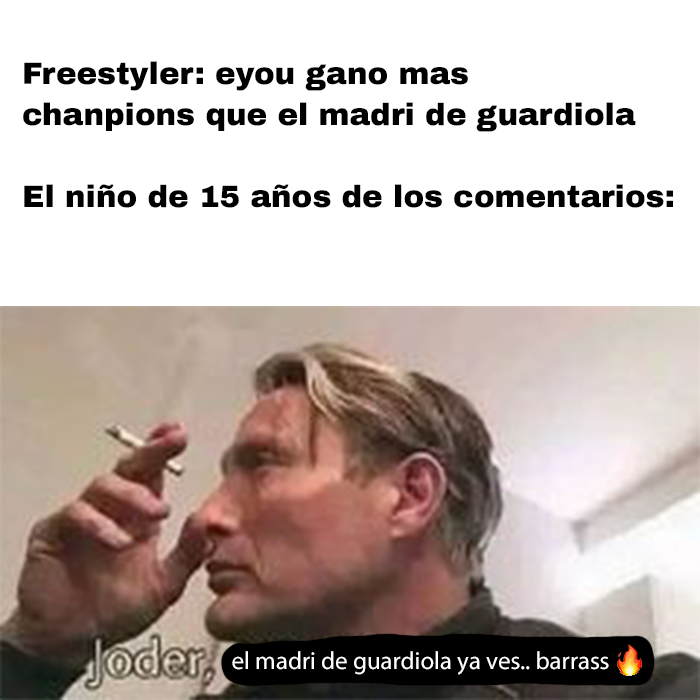
<style>
.page{position:relative;width:700px;height:700px;background:#ffffff}
.page>*{position:absolute;margin:0}
.t1{font:30.9px "ArchivoBlack-Regular";color:#000000}
.t2{font:24.9px "MyriadPro-Regular";color:#ffffff}
</style>
<div class="page">
<p class="t1" style="left:23px;top:61px;width:650px;height:147px">Freestyler: eyou gano mas<br>chanpions que el madri de guardiola<br><br>El niño de 15 años de los comentarios:</p>
<p class="t2" style="left:232px;top:651px;width:377px;height:24px">el madri de guardiola ya ves.. barrass</p>
</div>
